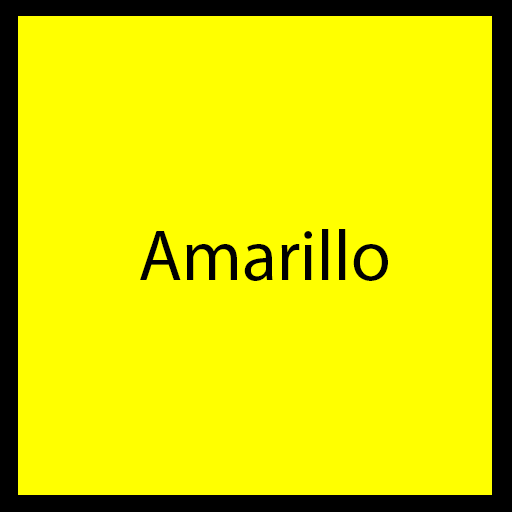
<style>
.page{position:relative;width:512px;height:512px;background:#ffff00}
.page>*{position:absolute;margin:0}
.t1{font:72px "MyriadPro-Regular";color:#000000}
</style>
<div class="page">
<p class="t1" style="left:140px;top:229px;width:248px;height:52px">Amarillo</p>
</div>
